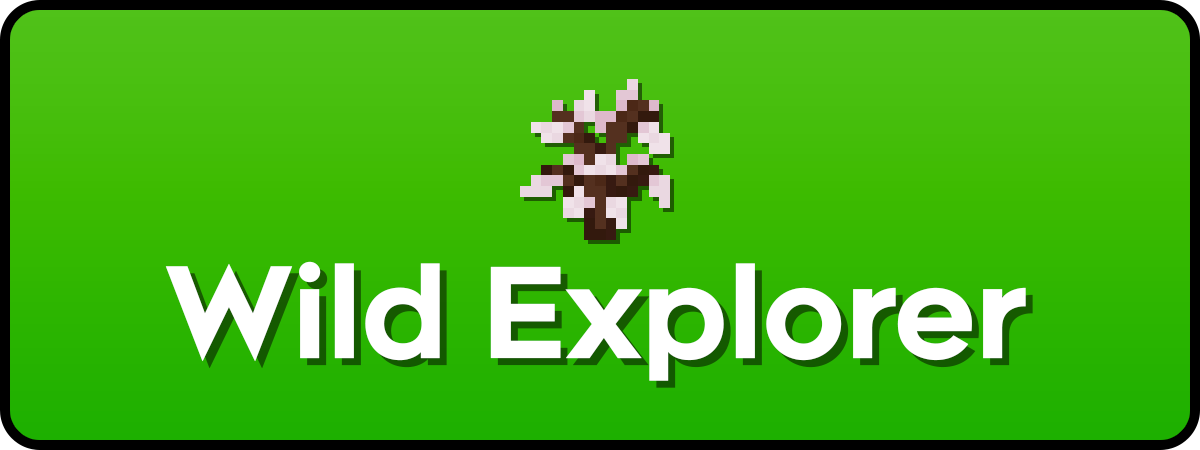
<style>
.page{position:relative;width:1200px;height:450px}
.page>*{position:absolute;margin:0}
.t1{font:124.9px "Renogare-Regular";letter-spacing:-0.05em;color:#ffffff;font-weight:bold}
</style>
<div class="page">
<p class="t1" style="left:165px;top:261px;width:861px;height:120px">Wild Explorer</p>
</div>
